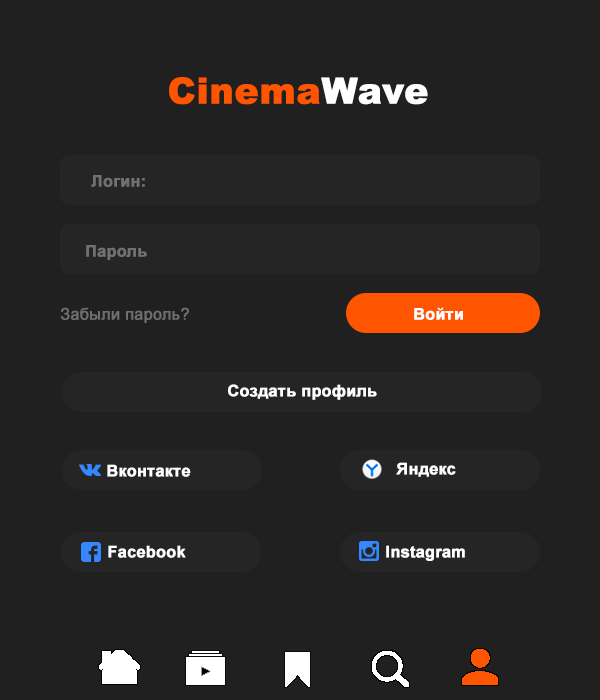
<style>
.page{position:relative;width:600px;height:700px;background:#202020}
.page>*{position:absolute;margin:0}
.t1{font:36px "Arial-Black";color:#ff5500;font-weight:bold}
.t2{font:36px "Arial-Black";color:#ffffff;font-weight:bold}
.t3{font:16px "Arial-BoldMT";color:#717171;font-weight:bold}
.t4{font:16px "ArialMT";color:#6f6f6f;font-weight:bold}
.t5{font:16px "Arial-BoldMT";color:#ffffff;font-weight:bold}
</style>
<div class="page">
<p class="t1" style="left:169px;top:77px;width:259px;height:28px">Cinema<span class="t2">Wave</span></p>
<p class="t3" style="left:91px;top:175px;width:54px;height:12px">Логин:</p>
<p class="t3" style="left:86px;top:245px;width:61px;height:15px">Пароль</p>
<p class="t4" style="left:60px;top:307px;width:129px;height:16px">Забыли пароль?</p>
<p class="t5" style="left:414px;top:307px;width:49px;height:13px">Войти</p>
<p class="t5" style="left:228px;top:384px;width:149px;height:16px">Создать профиль</p>
<p class="t5" style="left:396px;top:462px;width:60px;height:15px">Яндекс</p>
<p class="t5" style="left:107px;top:464px;width:84px;height:13px">Вконтакте</p>
<p class="t5" style="left:108px;top:545px;width:78px;height:13px">Facebook</p>
<p class="t5" style="left:386px;top:545px;width:79px;height:16px">Instagram</p>
</div>
